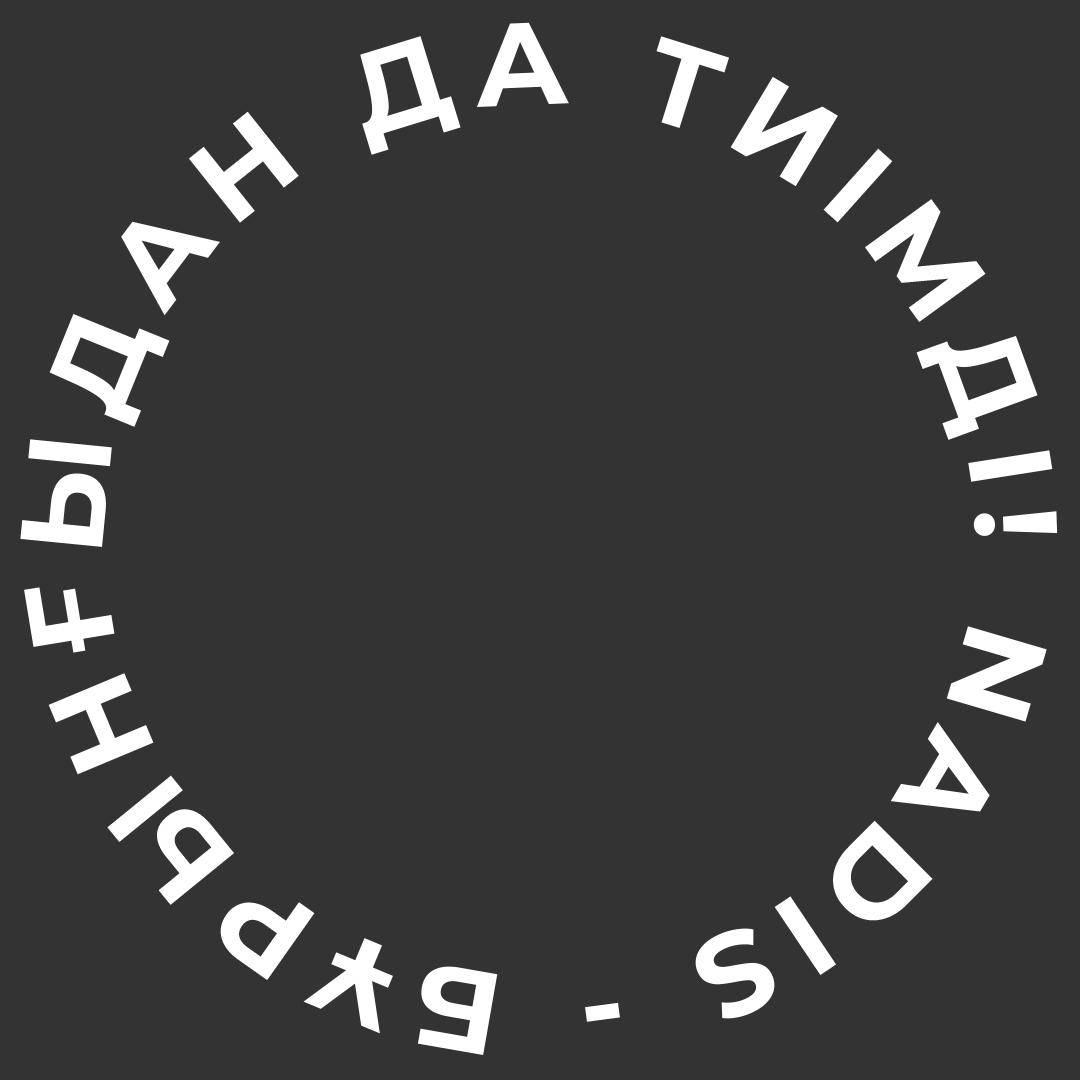
<style>
.page{position:relative;width:1080px;height:1080px;background:#333333}
.page>*{position:absolute;margin:0}
.t1{font:117.1px "Montserrat-Bold";letter-spacing:0.14em;color:#ffffff;text-transform:uppercase}
</style>
<div class="page">
<p class="t1" style="left:20px;top:22px;width:1038px;height:1033px;rotate:-54deg">NADIS - Бұрынғыдан да тиімді!</p>
</div>
